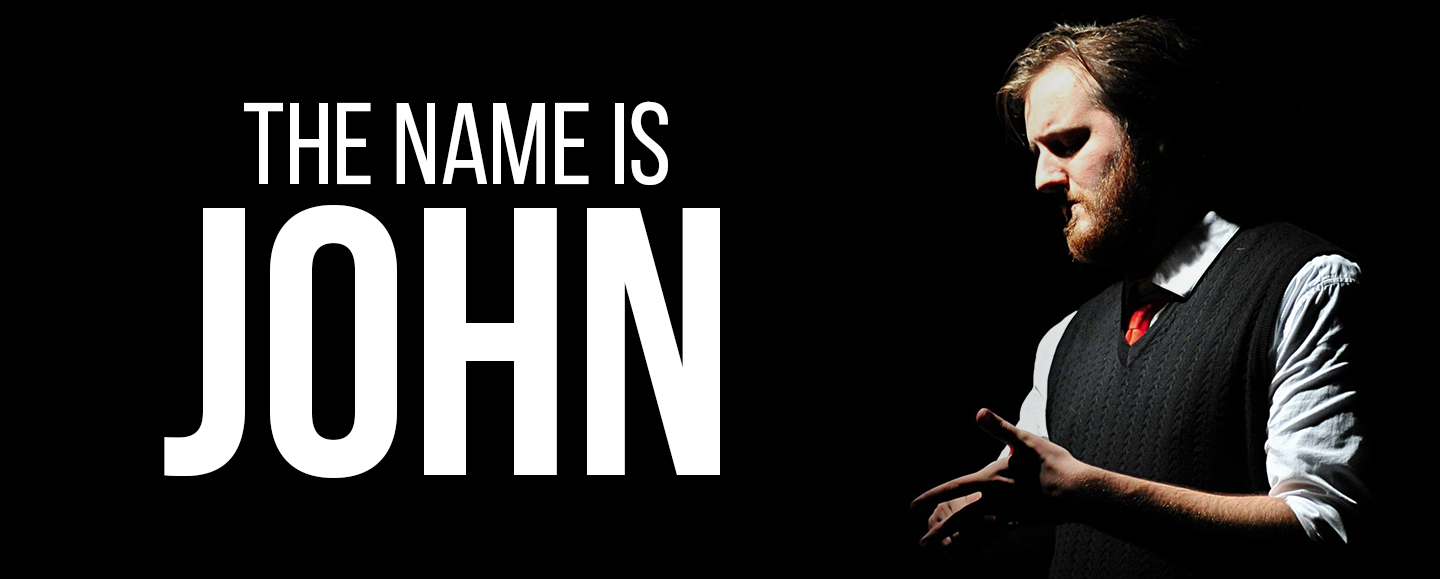
<style>
.page{position:relative;width:1440px;height:579px;background:#000000}
.page>*{position:absolute;margin:0}
.t1{font:116.4px "BebasNeueRegular";color:#ffffff}
.t2{font:381px "BebasNeueBold";color:#ffffff}
</style>
<div class="page">
<p class="t1" style="left:244px;top:101px;width:424px;height:85px">the name is</p>
<p class="t2" style="left:164px;top:205px;width:556px;height:273px">JOHN</p>
</div>
